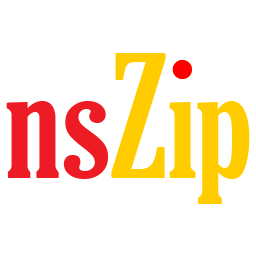
<style>
.page{position:relative;width:256px;height:256px;background:#ffffff}
.page>*{position:absolute;margin:0}
.t1{font:165px "GloucesterMT-ExtraCondensed";color:#ffcc00}
.t2{font:165px "GloucesterMT-ExtraCondensed";color:#ed1c24}
</style>
<div class="page">
<p class="t1" style="left:6px;top:53px;width:244px;height:151px"><span class="t2">ns</span>Zip</p>
</div>
